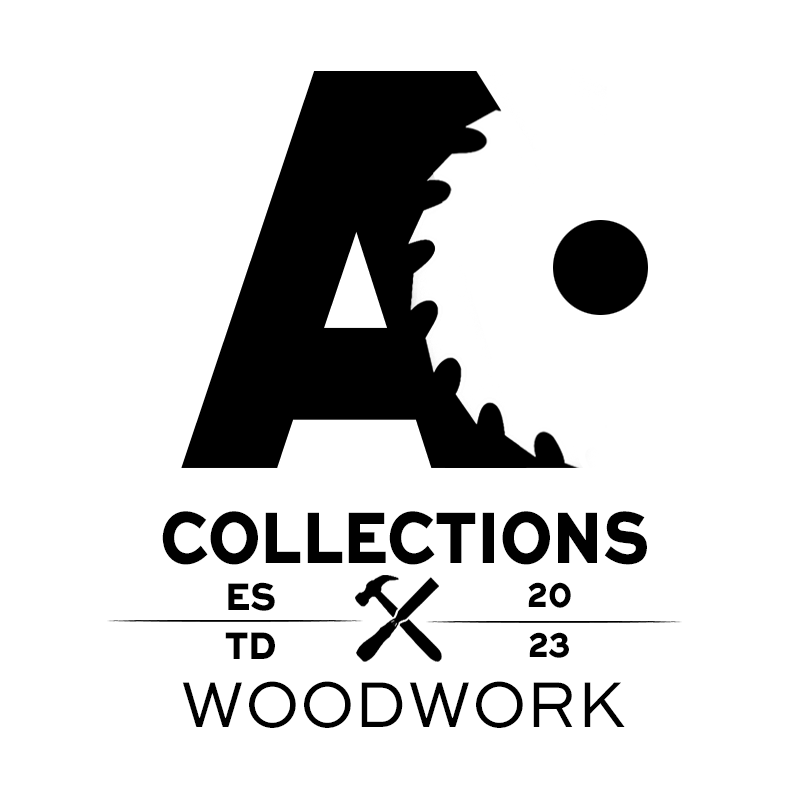
<style>
.page{position:relative;width:800px;height:800px;background:#ffffff}
.page>*{position:absolute;margin:0}
.t1{font:76.8px "SweetSansPro-Heavy";color:#000000;scale:0.83 1}
.t2{font:40.7px "SweetSansPro-Heavy";color:#000000;scale:0.88 1}
.t3{font:41.5px "SweetSansPro-Heavy";color:#000000;scale:0.82 1}
.t4{font:68.1px "SweetSansPro-Regular";color:#000000;scale:0.94 1}
</style>
<div class="page">
<p class="t1" style="left:162px;top:511px;width:485px;height:54px">COLLECTIONS</p>
<p class="t2" style="left:225px;top:582px;width:50px;height:77px;text-align:center">ES<br>TD</p>
<p class="t3" style="left:528px;top:582px;width:43px;height:76px;text-align:center">20<br>23</p>
<p class="t4" style="left:182px;top:681px;width:443px;height:47px">WOODWORK</p>
</div>
